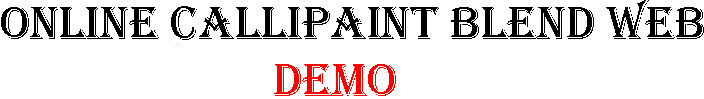
<style>
.page{position:relative;width:704px;height:99px;background:#ffffff}
.page>*{position:absolute;margin:0}
.t1{font:48px "Algerian";color:#000000}
.t2{font:48px "Algerian";color:#ff0000}
</style>
<div class="page">
<p class="t1" style="left:1px;top:0px;width:703px;height:96px">Online CalliPaint Blend Web<br><span class="t2">       DEMO</span></p>
</div>
